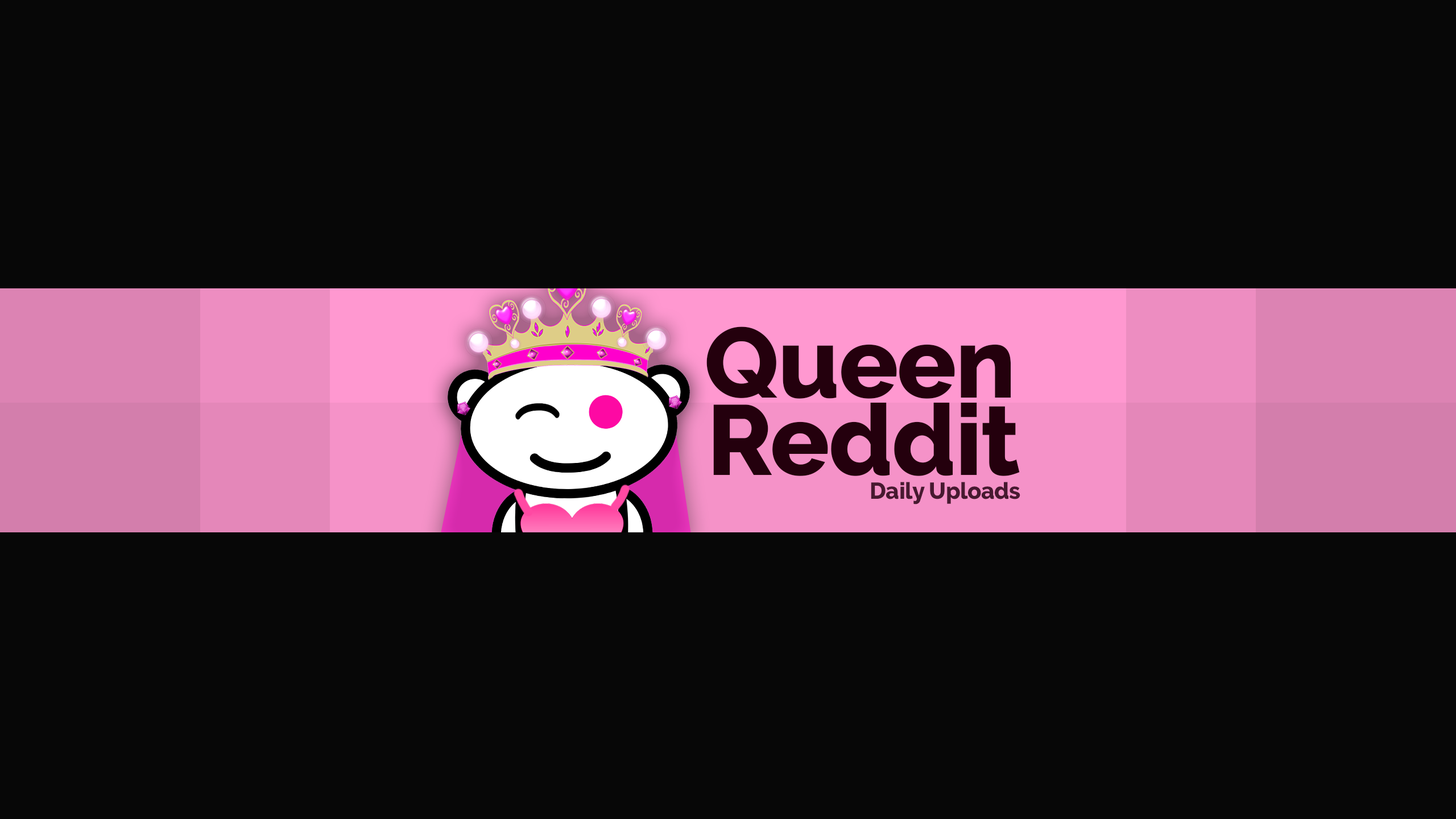
<style>
.page{position:relative;width:1456px;height:819px;background:#070707}
.page>*{position:absolute;margin:0}
.t1{font:98.9px "Raleway-ExtraBold";letter-spacing:-0.012em;color:#24000d}
.t2{font:23px "Raleway-ExtraBold";letter-spacing:-0.012em;color:#471930}
</style>
<div class="page">
<p class="t1" style="left:706px;top:326px;width:305px;height:73px">Queen</p>
<p class="t1" style="left:713px;top:402px;width:307px;height:74px">Reddit</p>
<p class="t2" style="left:871px;top:482px;width:149px;height:22px">Daily Uploads</p>
</div>
